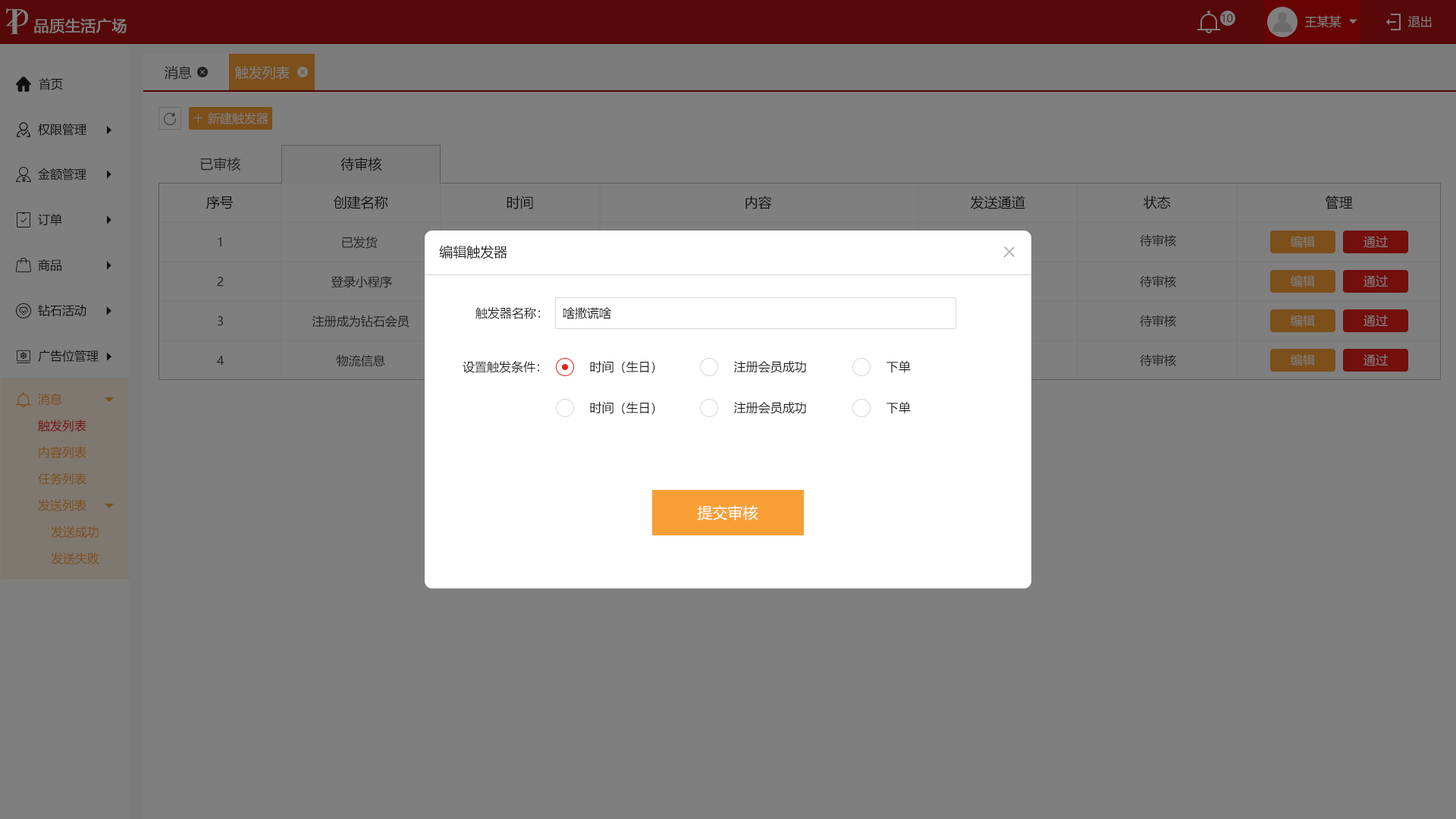
<style>
.page{position:relative;width:1456px;height:819px;background:#7f7f7f}
.page>*{position:absolute;margin:0}
.t1{font:10.6px "MicrosoftYaHei";color:#4e0303;text-transform:uppercase}
.t2{font:12.1px "MicrosoftYaHei";color:#7f7f7f;text-transform:uppercase}
.t3{font:15.2px "MicrosoftYaHei";color:#7f7f7f;text-transform:uppercase;font-weight:bold}
.t4{font:13.6px "MicrosoftYaHei";color:#202020;text-transform:uppercase}
.t5{font:13.6px "MicrosoftYaHei";color:#7f7f7f;text-transform:uppercase}
.t6{font:12.1px "MicrosoftYaHei";color:#202020;text-transform:uppercase}
.t7{font:12.1px "MicrosoftYaHei";color:#7c4f1b;text-transform:uppercase}
.t8{font:12.1px "MicrosoftYaHei";color:#730f0c;text-transform:uppercase}
.t9{font:15.2px "MicrosoftYaHei";color:#ffffff}
</style>
<div class="page">
<p class="t1" style="left:1222px;top:14px;width:11px;height:9px">10</p>
<p class="t2" style="left:1305px;top:15px;width:36px;height:13px">王某某</p>
<p class="t2" style="left:1408px;top:16px;width:24px;height:11px">退出</p>
<p class="t3" style="left:34px;top:18px;width:93px;height:15px">品质生活广场</p>
<p class="t4" style="left:165px;top:66px;width:27px;height:14px">消息</p>
<p class="t5" style="left:235px;top:66px;width:55px;height:14px">触发列表</p>
<p class="t6" style="left:39px;top:78px;width:24px;height:12px">首页</p>
<p class="t2" style="left:208px;top:112px;width:60px;height:12px">新建触发器</p>
<p class="t6" style="left:38px;top:123px;width:48px;height:13px">权限管理</p>
<p class="t4" style="left:200px;top:157px;width:41px;height:14px">已审核</p>
<p class="t4" style="left:340px;top:157px;width:42px;height:14px">待审核</p>
<p class="t6" style="left:38px;top:168px;width:48px;height:12px">金额管理</p>
<p class="t4" style="left:206px;top:196px;width:28px;height:13px">序号</p>
<p class="t4" style="left:334px;top:196px;width:54px;height:13px">创建名称</p>
<p class="t4" style="left:507px;top:196px;width:26px;height:13px">时间</p>
<p class="t4" style="left:745px;top:196px;width:27px;height:13px">内容</p>
<p class="t4" style="left:971px;top:196px;width:54px;height:13px">发送通道</p>
<p class="t4" style="left:1143px;top:196px;width:28px;height:13px">状态</p>
<p class="t4" style="left:1326px;top:196px;width:27px;height:13px">管理</p>
<p class="t6" style="left:38px;top:213px;width:24px;height:13px">订单</p>
<p class="t6" style="left:218px;top:237px;width:3px;height:10px">1</p>
<p class="t6" style="left:342px;top:236px;width:36px;height:13px">已发货</p>
<p class="t4" style="left:439px;top:245px;width:68px;height:14px">编辑触发器</p>
<p class="t6" style="left:1140px;top:234px;width:36px;height:12px">待审核</p>
<p class="t2" style="left:1291px;top:236px;width:24px;height:12px">编辑</p>
<p class="t2" style="left:1363px;top:236px;width:25px;height:12px">通过</p>
<p class="t6" style="left:38px;top:259px;width:23px;height:12px">商品</p>
<p class="t6" style="left:217px;top:277px;width:7px;height:10px">2</p>
<p class="t6" style="left:331px;top:275px;width:61px;height:13px">登录小程序</p>
<p class="t6" style="left:1140px;top:275px;width:36px;height:12px">待审核</p>
<p class="t2" style="left:1291px;top:275px;width:24px;height:12px">编辑</p>
<p class="t2" style="left:1363px;top:275px;width:25px;height:12px">通过</p>
<p class="t6" style="left:38px;top:304px;width:48px;height:12px">钻石活动</p>
<p class="t6" style="left:218px;top:316px;width:5px;height:10px">3</p>
<p class="t6" style="left:312px;top:315px;width:97px;height:13px">注册成为钻石会员</p>
<p class="t6" style="left:475px;top:307px;width:65px;height:12px">触发器名称：</p>
<p class="t6" style="left:563px;top:307px;width:48px;height:12px">啥撒谎啥</p>
<p class="t6" style="left:1140px;top:315px;width:36px;height:12px">待审核</p>
<p class="t2" style="left:1291px;top:315px;width:24px;height:12px">编辑</p>
<p class="t2" style="left:1363px;top:315px;width:25px;height:12px">通过</p>
<p class="t6" style="left:38px;top:350px;width:61px;height:12px">广告位管理</p>
<p class="t6" style="left:217px;top:356px;width:7px;height:10px">4</p>
<p class="t6" style="left:336px;top:354px;width:49px;height:13px">物流信息</p>
<p class="t6" style="left:463px;top:361px;width:76px;height:12px">设置触发条件：</p>
<p class="t6" style="left:590px;top:361px;width:65px;height:12px">时间（生日）</p>
<p class="t6" style="left:734px;top:361px;width:72px;height:12px">注册会员成功</p>
<p class="t6" style="left:886px;top:360px;width:25px;height:13px">下单</p>
<p class="t6" style="left:1140px;top:354px;width:36px;height:12px">待审核</p>
<p class="t2" style="left:1291px;top:354px;width:24px;height:12px">编辑</p>
<p class="t2" style="left:1363px;top:354px;width:25px;height:12px">通过</p>
<p class="t7" style="left:38px;top:393px;width:24px;height:12px">消息</p>
<p class="t6" style="left:590px;top:402px;width:65px;height:12px">时间（生日）</p>
<p class="t6" style="left:734px;top:402px;width:72px;height:12px">注册会员成功</p>
<p class="t6" style="left:886px;top:401px;width:25px;height:13px">下单</p>
<p class="t8" style="left:38px;top:419px;width:48px;height:12px">触发列表</p>
<p class="t7" style="left:39px;top:446px;width:47px;height:13px">内容列表</p>
<p class="t7" style="left:38px;top:472px;width:48px;height:13px">任务列表</p>
<p class="t7" style="left:38px;top:499px;width:48px;height:12px">发送列表</p>
<p class="t9" style="left:697px;top:505px;width:61px;height:15px">提交审核</p>
<p class="t7" style="left:51px;top:526px;width:48px;height:12px">发送成功</p>
<p class="t7" style="left:51px;top:552px;width:48px;height:13px">发送失败</p>
</div>
